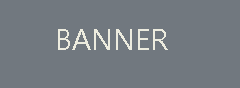
<style>
.page{position:relative;width:240px;height:88px;background:#71787f}
.page>*{position:absolute;margin:0}
.t1{font:30px "SegoeUISymbol";color:#edecdf}
</style>
<div class="page">
<p class="t1" style="left:58px;top:29px;width:110px;height:21px">BANNER</p>
</div>
